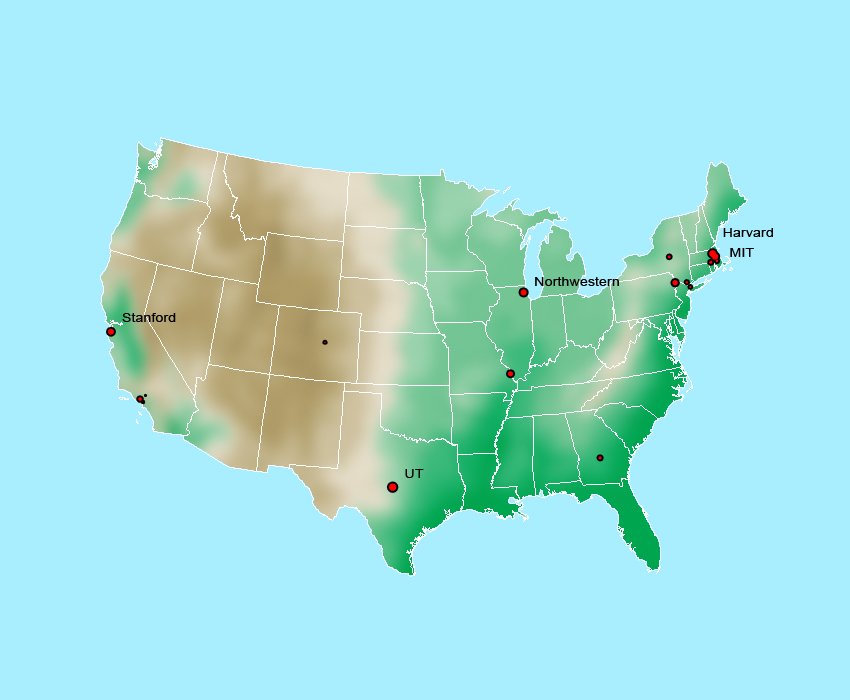
<style>
.page{position:relative;width:850px;height:700px;background:#a8eeff}
.page>*{position:absolute;margin:0}
.t1{font:12px "ArialMT";color:#000000;scale:1.2 1}
</style>
<div class="page">
<p class="t1" style="left:723px;top:228px;width:50px;height:9px">Harvard</p>
<p class="t1" style="left:730px;top:248px;width:24px;height:9px">MIT</p>
<p class="t1" style="left:535px;top:277px;width:84px;height:9px">Northwestern</p>
<p class="t1" style="left:122px;top:313px;width:54px;height:9px">Stanford</p>
<p class="t1" style="left:405px;top:469px;width:19px;height:9px">UT</p>
</div>
